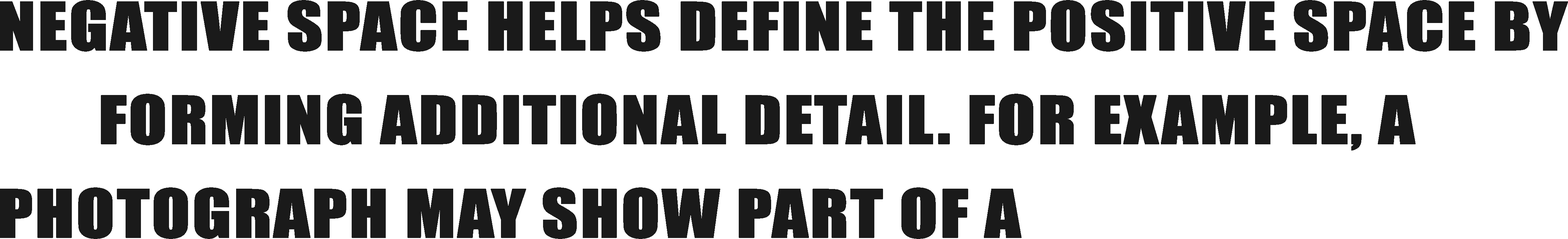
<style>
.page{position:relative;width:1568px;height:239px;background:#ffffff}
.page>*{position:absolute;margin:0}
.t1{font:61.6px/93.8px "Impact";color:#1a1a1a;text-transform:uppercase;font-weight:bold;scale:1.15 1}
</style>
<div class="page">
<p class="t1" style="left:0px;top:0px;width:1568px;height:239px">Negative space helps define the positive space by                 Forming additional detail. For example, a photograph may show part of a</p>
</div>
